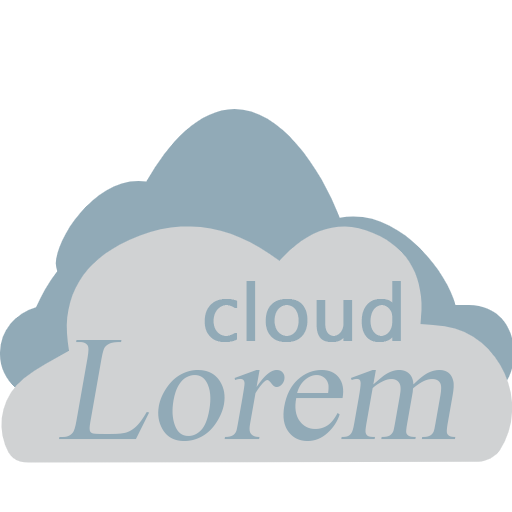
<style>
.page{position:relative;width:512px;height:512px;background:#ffffff}
.page>*{position:absolute;margin:0}
.t1{font:80px "SegoeUI";color:#91aab7;font-weight:bold}
.t2{font:150px "TimesNewRomanPSMT";color:#91aab7;font-style:italic}
</style>
<div class="page">
<p class="t1" style="left:204px;top:281px;width:197px;height:61px">cloud</p>
<p class="t2" style="left:59px;top:340px;width:397px;height:101px">Lorem</p>
</div>
